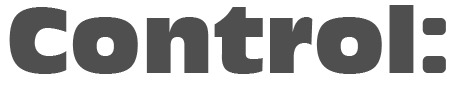
<style>
.page{position:relative;width:458px;height:86px;background:#ffffff}
.page>*{position:absolute;margin:0}
.t1{font:86.8px "AntiqueOliveCompact-Regular";color:#4f4f4f}
</style>
<div class="page">
<p class="t1" style="left:9px;top:5px;width:437px;height:69px">Control:</p>
</div>
